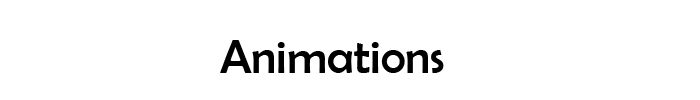
<style>
.page{position:relative;width:700px;height:100px;background:#ffffff}
.page>*{position:absolute;margin:0}
.t1{font:48px "BerlinSansFB-Reg";color:#000000}
</style>
<div class="page">
<p class="t1" style="left:220px;top:40px;width:224px;height:33px">Animations</p>
</div>
